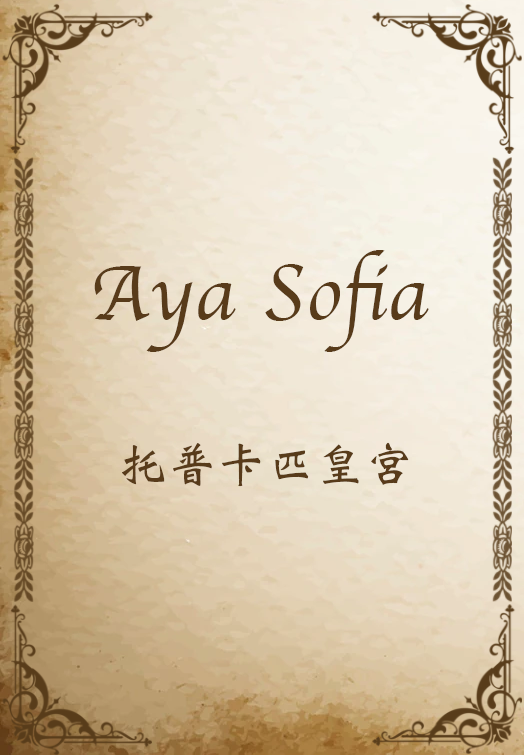
<style>
.page{position:relative;width:524px;height:755px}
.page>*{position:absolute;margin:0}
.t1{font:80px "Apple-Chancery";letter-spacing:0.025em;color:#583b1a}
.t2{font:48px "WeibeiSC-Bold";letter-spacing:0.025em;color:#583b1a}
</style>
<div class="page">
<p class="t1" style="left:94px;top:250px;width:335px;height:102px">Aya Sofia</p>
<p class="t2" style="left:122px;top:442px;width:287px;height:45px">托普卡匹皇宮</p>
</div>
